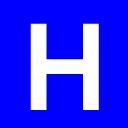
<style>
.page{position:relative;width:128px;height:128px;background:#0000ff}
.page>*{position:absolute;margin:0}
.t1{font:120px "MalgunGothicBold";letter-spacing:-0.05em;color:#ffffff;scale:0.95 1}
</style>
<div class="page">
<p class="t1" style="left:30px;top:23px;width:69px;height:87px">H</p>
</div>
